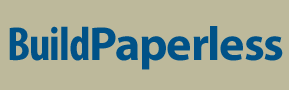
<style>
.page{position:relative;width:289px;height:90px;background:#bdb99b}
.page>*{position:absolute;margin:0}
.t1{font:48px "MyriadPro-Bold";letter-spacing:-0.025em;color:#005288}
.t2{font:48px "MyriadPro-BoldCond";letter-spacing:-0.025em;color:#005288}
</style>
<div class="page">
<p class="t1" style="left:9px;top:26px;width:274px;height:44px"><span class="t2">Build</span>Paperless</p>
</div>
